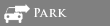
<style>
.page{position:relative;width:110px;height:26px;background:#808080}
.page>*{position:absolute;margin:0}
.t1{font:12px "TrajanPro-Bold";color:#ffffff;scale:1.05 1}
</style>
<div class="page">
<p class="t1" style="left:33px;top:8px;width:34px;height:9px">Park</p>
</div>
